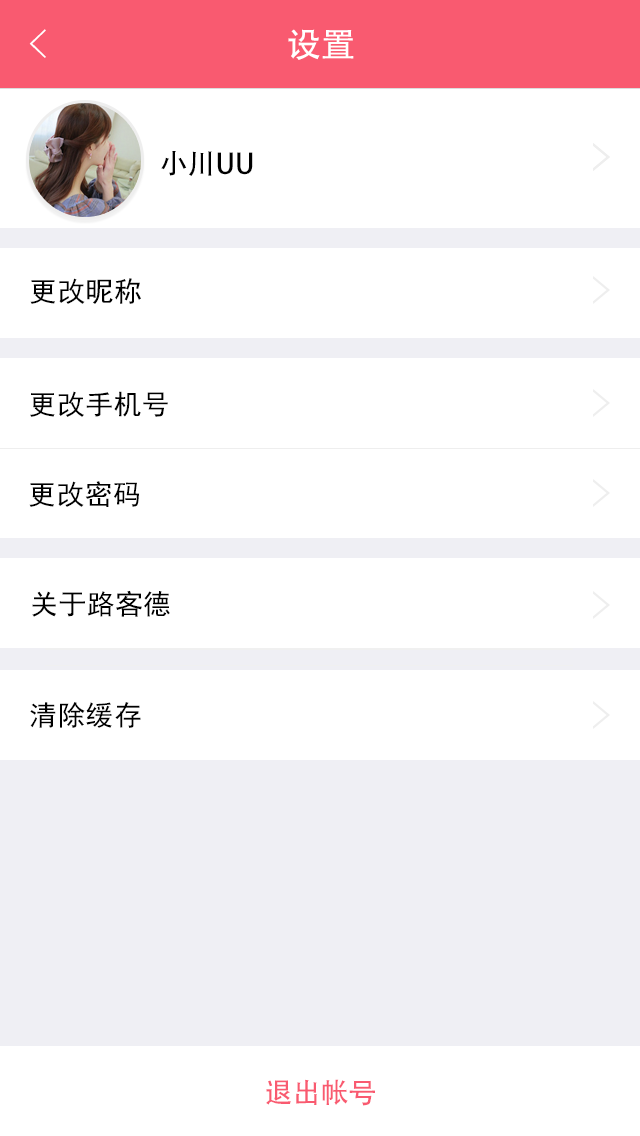
<style>
.page{position:relative;width:640px;height:1136px;background:#ffffff}
.page>*{position:absolute;margin:0}
.t1{font:40px "FZYXJW--GB1-0";color:#ffffff}
.t2{font:34px "AdobeHeitiStd-Regular";color:#ffffff}
.t3{font:28px "AdobeHeitiStd-Regular";color:#000000}
.t4{font:28px "SimHei";letter-spacing:0.01em;color:#000000}
.t5{font:28px "AdobeHeitiStd-Regular";color:#f95a70}
</style>
<div class="page">
<p class="t1" style="left:29px;top:29px;width:17px;height:29px">&lt;</p>
<p class="t2" style="left:288px;top:29px;width:66px;height:31px">设置</p>
<p class="t3" style="left:161px;top:151px;width:92px;height:25px">小川UU</p>
<p class="t4" style="left:30px;top:278px;width:111px;height:26px">更改昵称</p>
<p class="t4" style="left:30px;top:391px;width:138px;height:26px">更改手机号</p>
<p class="t4" style="left:29px;top:481px;width:110px;height:26px">更改密码</p>
<p class="t4" style="left:32px;top:590px;width:138px;height:27px">关于路客德</p>
<p class="t4" style="left:30px;top:702px;width:111px;height:26px">清除缓存</p>
<p class="t5" style="left:266px;top:1079px;width:109px;height:27px">退出帐号</p>
</div>
